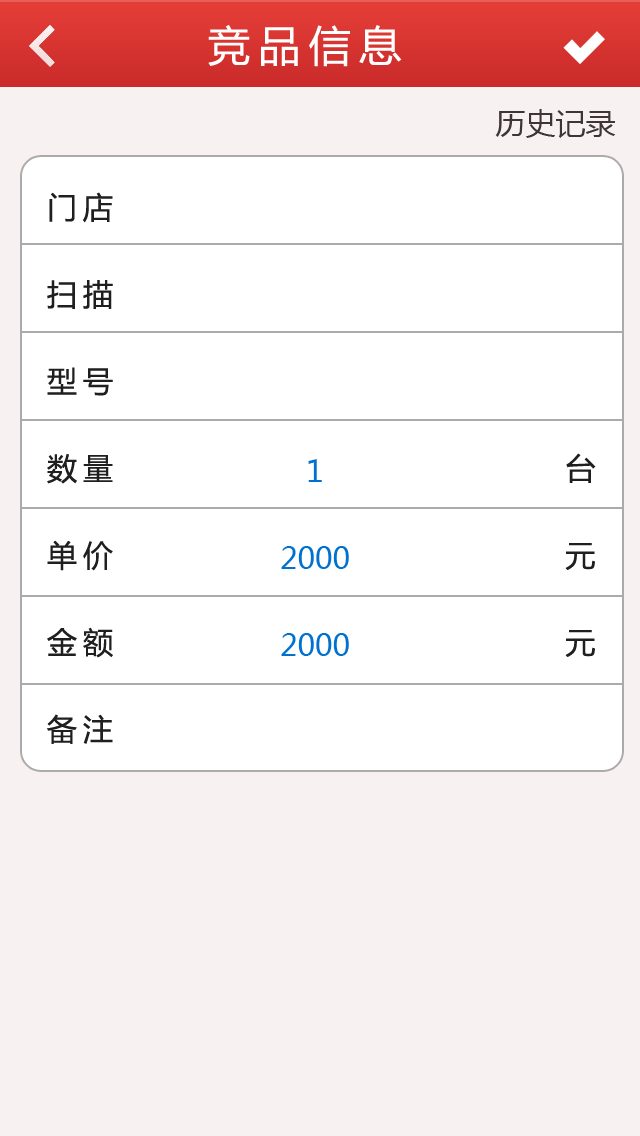
<style>
.page{position:relative;width:640px;height:1136px;background:#ffffff}
.page>*{position:absolute;margin:0}
.t1{font:42px "MicrosoftYaHei";letter-spacing:0.2em;color:#ffffff}
.t2{font:30px "MicrosoftYaHei";color:#3e3536}
.t3{font:30px/87px "MicrosoftYaHei";letter-spacing:0.2em;color:#1f1f1f}
.t4{font:30px/87px "MicrosoftYaHei";color:#0071d1}
</style>
<div class="page">
<p class="t1" style="left:208px;top:25px;width:194px;height:42px">竞品信息</p>
<p class="t2" style="left:495px;top:109px;width:121px;height:29px">历史记录</p>
<p class="t3" style="left:47px;top:192px;width:549px;height:552px">门店<br>扫描<br>型号<br>数量                              台<br>单价                              元<br>金额                              元<br>备注</p>
<p class="t4" style="left:281px;top:459px;width:68px;height:197px;text-align:center">1<br>2000<br>2000</p>
</div>
